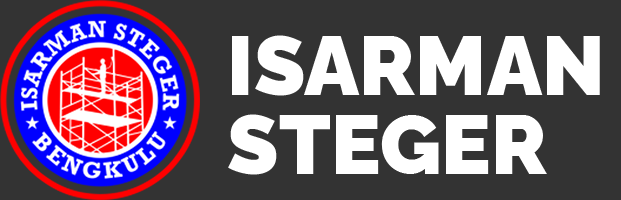
<style>
.page{position:relative;width:621px;height:200px;background:#333333}
.page>*{position:absolute;margin:0}
.t1{font:83.3px "Raleway-Black";color:#ffffff}
</style>
<div class="page">
<p class="t1" style="left:232px;top:35px;width:368px;height:61px">ISARMAN</p>
<p class="t1" style="left:228px;top:114px;width:319px;height:61px">STEGER</p>
</div>
